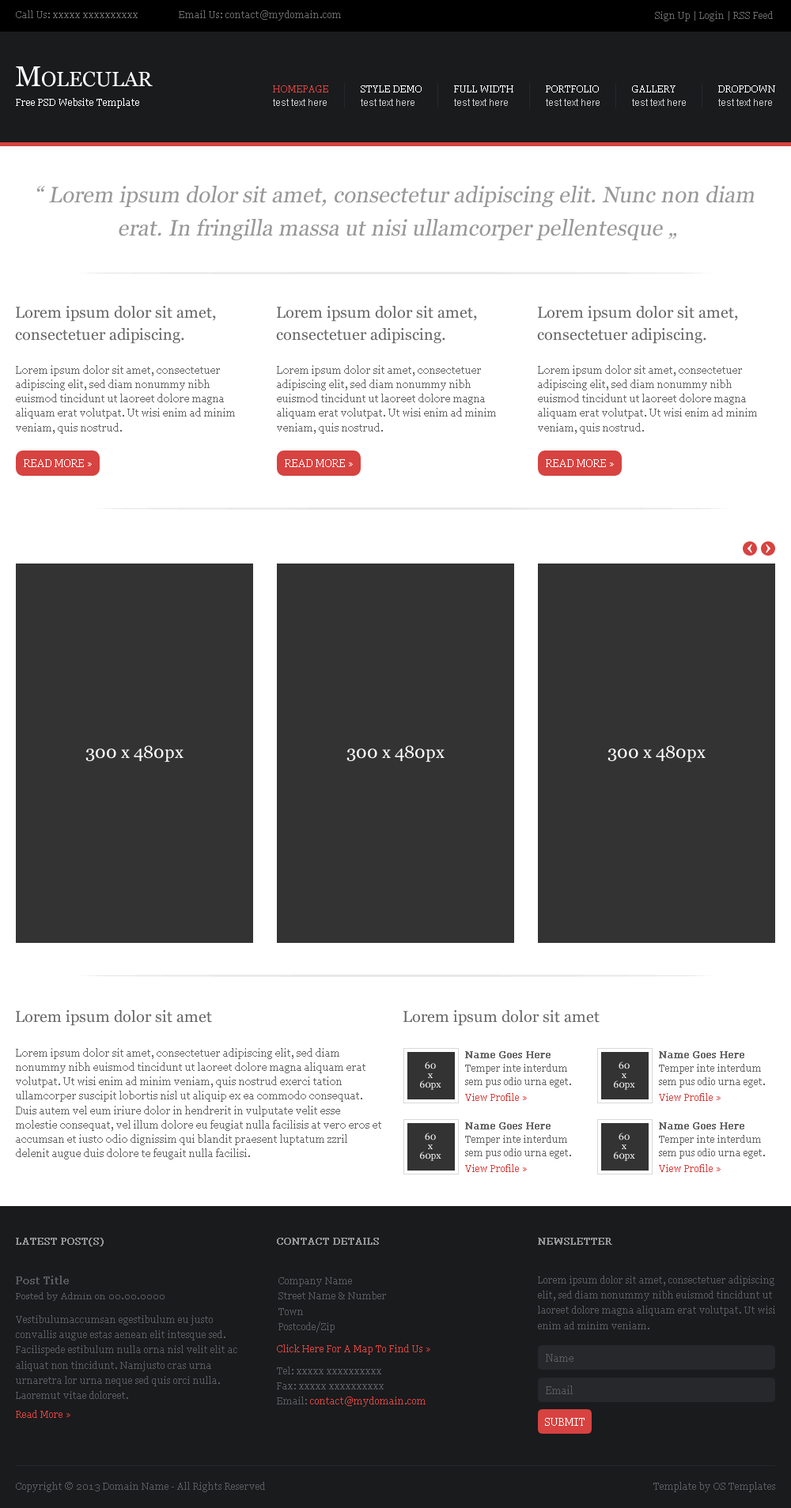
<style>
.page{position:relative;width:791px;height:1508px;background:#ffffff}
.page>*{position:absolute;margin:0}
.t1{font:9.5px "Georgia";color:#696969}
.t2{font:20.6px "Georgia";color:#ffffff}
.t3{font:28.5px "Georgia";color:#ffffff}
.t4{font:9.5px "Georgia";color:#d74340}
.t5{font:9.5px "Georgia";color:#ffffff}
.t6{font:9.5px "ArialMT";color:#cccccc}
.t7{font:22.1px/33.2px "Georgia";color:#989898;font-style:italic}
.t8{font:22.1px/22.1px "Georgia";color:#989898;font-style:italic}
.t9{font:15.8px/22.1px "Georgia";color:#666666}
.t10{font:10.3px/14.4px "Georgia";color:#666666}
.t11{font:10.3px "Georgia";color:#ffffff}
.t12{font:17.4px "Georgia";color:#ffffff}
.t13{font:15.8px "Georgia";color:#666666}
.t14{font:9.5px/9.5px "Georgia";color:#ffffff}
.t15{font:9.5px "Georgia";color:#666666;font-weight:bold}
.t16{font:9.5px/13.3px "Georgia";color:#666666}
.t17{font:9.5px "Georgia";color:#979797;font-weight:bold}
.t18{font:10.3px "Georgia";color:#585c5f;font-weight:bold}
.t19{font:9.5px/15.2px "Georgia";color:#585c5f}
.t20{font:9.5px/15.2px "Georgia";color:#585b5f}
.t21{font:8.7px "Georgia";color:#585c5f}
.t22{font:9.5px "Georgia";color:#d7433f}
.t23{font:10.3px "Georgia";color:#585c5f}
.t24{font:9.5px/15.2px "Georgia";color:#d74340}
.t25{font:9.5px "Georgia";color:#585b5f}
.t26{font:9.5px "Georgia";color:#585c5f}
</style>
<div class="page">
<p class="t1" style="left:16px;top:10px;width:325px;height:11px">Call Us: xxxxx xxxxxxxxxx                 Email Us: contact@mydomain.com</p>
<p class="t1" style="left:655px;top:11px;width:117px;height:10px">Sign Up | Login | RSS Feed</p>
<p class="t2" style="left:16px;top:66px;width:137px;height:21px"><span class="t3">M</span>OLECULAR</p>
<p class="t4" style="left:273px;top:85px;width:55px;height:7px">HOMEPAGE</p>
<p class="t5" style="left:360px;top:85px;width:61px;height:7px">STYLE DEMO</p>
<p class="t5" style="left:454px;top:85px;width:59px;height:7px">FULL WIDTH</p>
<p class="t5" style="left:545px;top:85px;width:53px;height:7px">PORTFOLIO</p>
<p class="t5" style="left:632px;top:85px;width:43px;height:7px">GALLERY</p>
<p class="t5" style="left:718px;top:85px;width:57px;height:7px">DROPDOWN</p>
<p class="t5" style="left:16px;top:98px;width:123px;height:10px">Free PSD Website Template</p>
<p class="t6" style="left:273px;top:99px;width:53px;height:7px">test text here</p>
<p class="t6" style="left:360px;top:99px;width:54px;height:7px">test text here</p>
<p class="t6" style="left:454px;top:99px;width:54px;height:7px">test text here</p>
<p class="t6" style="left:545px;top:99px;width:54px;height:7px">test text here</p>
<p class="t6" style="left:632px;top:99px;width:53px;height:7px">test text here</p>
<p class="t6" style="left:718px;top:99px;width:54px;height:7px">test text here</p>
<p class="t7" style="left:36px;top:185px;width:718px;height:55px;text-align:center"><span class="t8">“</span> Lorem ipsum dolor sit amet, consectetur adipiscing elit. Nunc non diam <br>erat. In fringilla massa ut nisi ullamcorper pellentesque „</p>
<p class="t9" style="left:15px;top:306px;width:201px;height:38px">Lorem ipsum dolor sit amet, consectetuer adipiscing.</p>
<p class="t9" style="left:276px;top:306px;width:201px;height:38px">Lorem ipsum dolor sit amet, consectetuer adipiscing.</p>
<p class="t9" style="left:537px;top:306px;width:201px;height:38px">Lorem ipsum dolor sit amet, consectetuer adipiscing.</p>
<p class="t10" style="left:16px;top:365px;width:219px;height:69px">Lorem ipsum dolor sit amet, consectetuer adipiscing elit, sed diam nonummy nibh euismod tincidunt ut laoreet dolore magna aliquam erat volutpat. Ut wisi enim ad minim veniam, quis nostrud.</p>
<p class="t10" style="left:277px;top:365px;width:219px;height:69px">Lorem ipsum dolor sit amet, consectetuer adipiscing elit, sed diam nonummy nibh euismod tincidunt ut laoreet dolore magna aliquam erat volutpat. Ut wisi enim ad minim veniam, quis nostrud.</p>
<p class="t10" style="left:538px;top:365px;width:219px;height:69px">Lorem ipsum dolor sit amet, consectetuer adipiscing elit, sed diam nonummy nibh euismod tincidunt ut laoreet dolore magna aliquam erat volutpat. Ut wisi enim ad minim veniam, quis nostrud.</p>
<p class="t11" style="left:24px;top:459px;width:68px;height:8px">READ MORE »</p>
<p class="t11" style="left:285px;top:459px;width:68px;height:8px">READ MORE »</p>
<p class="t11" style="left:545px;top:459px;width:68px;height:8px">READ MORE »</p>
<p class="t12" style="left:85px;top:745px;width:98px;height:17px">300 x 480px</p>
<p class="t12" style="left:346px;top:745px;width:98px;height:17px">300 x 480px</p>
<p class="t12" style="left:607px;top:745px;width:98px;height:17px">300 x 480px</p>
<p class="t13" style="left:16px;top:1010px;width:196px;height:16px">Lorem ipsum dolor sit amet</p>
<p class="t13" style="left:403px;top:1010px;width:196px;height:16px">Lorem ipsum dolor sit amet</p>
<p class="t10" style="left:16px;top:1048px;width:365px;height:112px">Lorem ipsum dolor sit amet, consectetuer adipiscing elit, sed diam nonummy nibh euismod tincidunt ut laoreet dolore magna aliquam erat volutpat. Ut wisi enim ad minim veniam, quis nostrud exerci tation ullamcorper suscipit lobortis nisl ut aliquip ex ea commodo consequat. Duis autem vel eum iriure dolor in hendrerit in vulputate velit esse molestie consequat, vel illum dolore eu feugiat nulla facilisis at vero eros et accumsan et iusto odio dignissim qui blandit praesent luptatum zzril delenit augue duis dolore te feugait nulla facilisi.</p>
<p class="t14" style="left:420px;top:1062px;width:21px;height:28px;text-align:center">60<br>x<br>60px</p>
<p class="t15" style="left:465px;top:1051px;width:85px;height:8px">Name Goes Here</p>
<p class="t14" style="left:613px;top:1062px;width:22px;height:28px;text-align:center">60<br>x<br>60px</p>
<p class="t15" style="left:659px;top:1051px;width:85px;height:8px">Name Goes Here</p>
<p class="t16" style="left:465px;top:1064px;width:106px;height:24px">Temper inte interdum sem pus odio urna eget.</p>
<p class="t16" style="left:659px;top:1064px;width:105px;height:24px">Temper inte interdum sem pus odio urna eget.</p>
<p class="t4" style="left:465px;top:1093px;width:62px;height:8px">View Profile »</p>
<p class="t4" style="left:659px;top:1093px;width:61px;height:8px">View Profile »</p>
<p class="t14" style="left:420px;top:1133px;width:21px;height:28px;text-align:center">60<br>x<br>60px</p>
<p class="t15" style="left:465px;top:1123px;width:85px;height:7px">Name Goes Here</p>
<p class="t14" style="left:613px;top:1133px;width:22px;height:28px;text-align:center">60<br>x<br>60px</p>
<p class="t15" style="left:659px;top:1123px;width:85px;height:7px">Name Goes Here</p>
<p class="t16" style="left:465px;top:1135px;width:106px;height:24px">Temper inte interdum sem pus odio urna eget.</p>
<p class="t16" style="left:659px;top:1135px;width:105px;height:24px">Temper inte interdum sem pus odio urna eget.</p>
<p class="t4" style="left:465px;top:1164px;width:62px;height:8px">View Profile »</p>
<p class="t4" style="left:659px;top:1164px;width:61px;height:8px">View Profile »</p>
<p class="t17" style="left:16px;top:1238px;width:88px;height:9px">LATEST POST(S)</p>
<p class="t17" style="left:277px;top:1238px;width:102px;height:7px">CONTACT DETAILS</p>
<p class="t17" style="left:538px;top:1238px;width:74px;height:7px">NEWSLETTER</p>
<p class="t18" style="left:16px;top:1276px;width:53px;height:9px">Post Title</p>
<p class="t19" style="left:278px;top:1278px;width:108px;height:55px">Company Name<br>Street Name &amp; Number<br>Town<br>Postcode/Zip</p>
<p class="t20" style="left:538px;top:1276px;width:237px;height:54px">Lorem ipsum dolor sit amet, consectetuer adipiscing elit, sed diam nonummy nibh euismod tincidunt ut laoreet dolore magna aliquam erat volutpat. Ut wisi enim ad minim veniam.</p>
<p class="t21" style="left:16px;top:1293px;width:148px;height:8px">Posted by Admin on 00.00.0000</p>
<p class="t19" style="left:16px;top:1315px;width:221px;height:84px">Vestibulumaccumsan egestibulum eu justo convallis augue estas aenean elit intesque sed. Facilispede estibulum nulla orna nisl velit elit ac aliquat non tincidunt. Namjusto cras urna urnaretra lor urna neque sed quis orci nulla. Laoremut vitae doloreet.</p>
<p class="t22" style="left:277px;top:1345px;width:153px;height:10px">Click Here For A Map To Find Us »</p>
<p class="t23" style="left:545px;top:1354px;width:28px;height:8px">Name</p>
<p class="t19" style="left:277px;top:1367px;width:148px;height:40px">Tel: xxxxx xxxxxxxxxx<br>Fax: xxxxx xxxxxxxxxx<br>Email: <span class="t24">contact@mydomain.com</span></p>
<p class="t23" style="left:545px;top:1386px;width:27px;height:9px">Email</p>
<p class="t4" style="left:16px;top:1410px;width:54px;height:8px">Read More »</p>
<p class="t11" style="left:545px;top:1418px;width:39px;height:8px">SUBMIT</p>
<p class="t25" style="left:16px;top:1482px;width:249px;height:11px">Copyright © 2013 Domain Name - All Rights Reserved</p>
<p class="t26" style="left:653px;top:1482px;width:122px;height:11px">Template by OS Templates</p>
</div>
